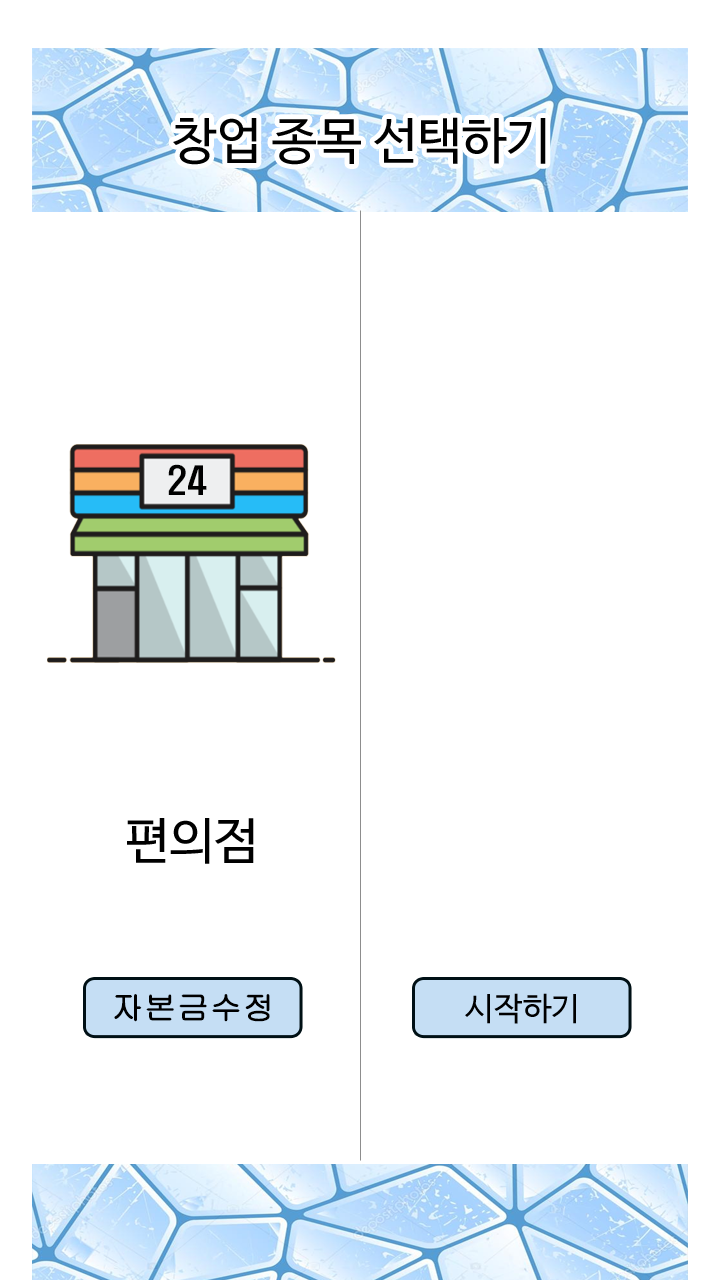
<style>
.page{position:relative;width:720px;height:1280px;background:#ffffff}
.page>*{position:absolute;margin:0}
.t1{font:50px "NanumBarunGothic";color:#000000}
.t2{font:35px "H2hdrM";color:#000000}
.t3{font:32px "Gulim";color:#000000;font-weight:bold}
.t4{font:32px "NanumBarunGothic";color:#000000}
</style>
<div class="page">
<p class="t1" style="left:173px;top:117px;width:373px;height:48px">창업 종목 선택하기</p>
<p class="t2" style="left:168px;top:464px;width:39px;height:31px">24</p>
<p class="t1" style="left:127px;top:818px;width:127px;height:46px">편의점</p>
<p class="t3" style="left:114px;top:994px;width:156px;height:28px">자본금수정</p>
<p class="t4" style="left:465px;top:993px;width:111px;height:31px">시작하기</p>
</div>
